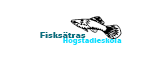
<style>
.page{position:relative;width:150px;height:70px;background:#ffffff}
.page>*{position:absolute;margin:0}
.t1{font:27.2px "Fishing";color:#000000;scale:1.28 1}
.t2{font:9.1px "AbadiMT-CondensedExtraBold";color:#07707f;scale:1.29 1}
.t3{font:7.7px "AbadiMT-CondensedExtraBold";color:#0ee0ff;scale:1.29 1}
</style>
<div class="page">
<p class="t1" style="left:70px;top:16px;width:52px;height:23px;rotate:180deg">V</p>
<p class="t2" style="left:40px;top:32px;width:46px;height:6px">Fisksätras</p>
<p class="t3" style="left:63px;top:37px;width:59px;height:8px">Högstadieskola</p>
</div>
